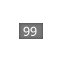
<style>
.page{position:relative;width:60px;height:60px;background:#ffffff}
.page>*{position:absolute;margin:0}
.t1{font:12px "MicrosoftYaHei";color:#ffffff}
</style>
<div class="page">
<p class="t1" style="left:23px;top:26px;width:14px;height:10px">99</p>
</div>
